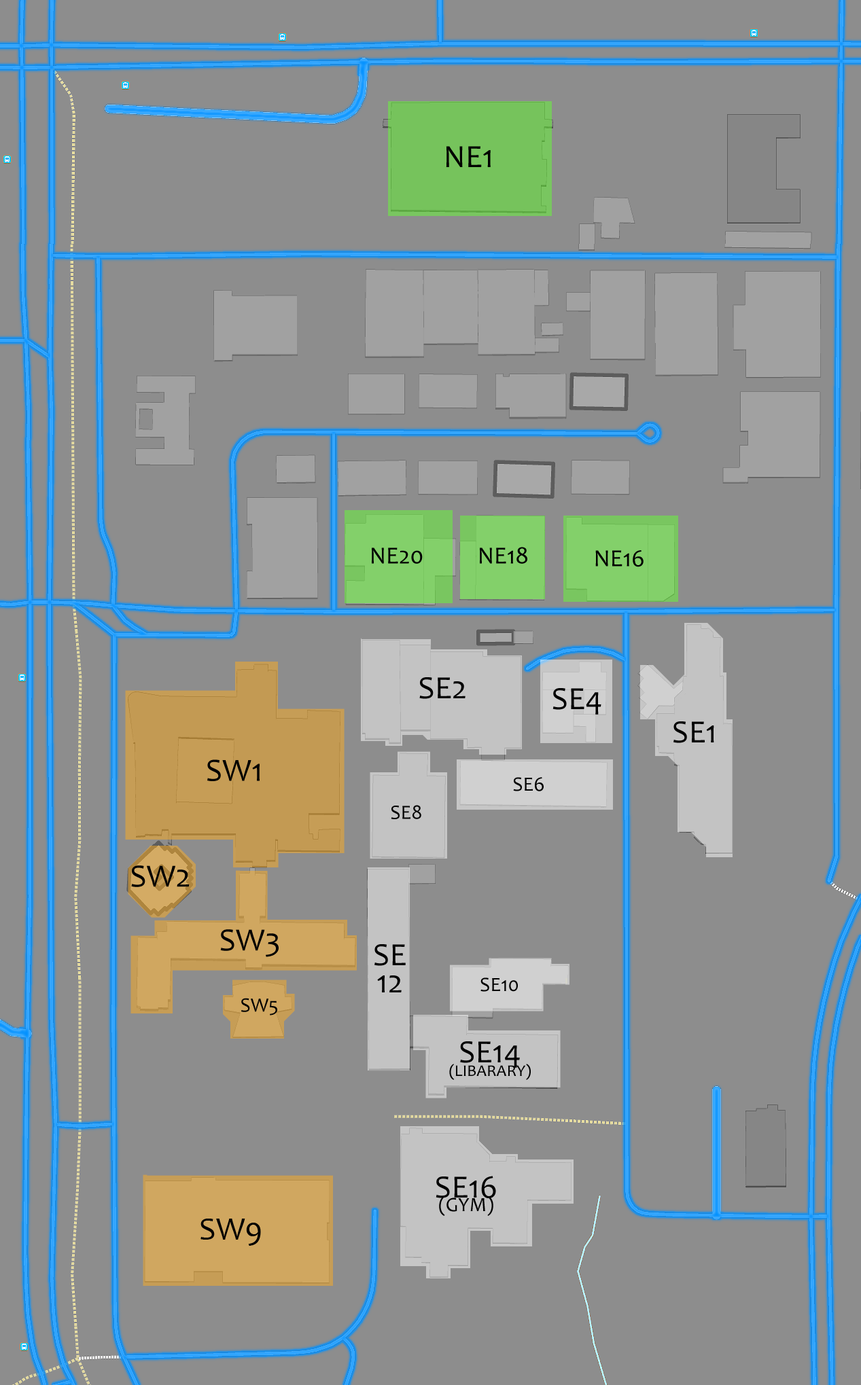
<style>
.page{position:relative;width:861px;height:1385px;background:#8d8d8d}
.page>*{position:absolute;margin:0}
.t1{font:32.6px "Candara";color:#000000}
.t2{font:24.5px "Candara";color:#000000}
.t3{font:20.4px "Candara";color:#000000}
.t4{font:32.6px/13.6px "Candara";color:#000000}
.t5{font:16.3px/13.6px "Candara";color:#000000}
.t6{font:20.4px/13.6px "Candara";color:#000000}
</style>
<div class="page">
<p class="t1" style="left:446px;top:146px;width:45px;height:21px">NE1</p>
<p class="t2" style="left:372px;top:548px;width:51px;height:16px">NE20</p>
<p class="t2" style="left:480px;top:547px;width:47px;height:17px">NE18</p>
<p class="t2" style="left:595px;top:550px;width:48px;height:17px">NE16</p>
<p class="t1" style="left:419px;top:677px;width:46px;height:22px">SE2</p>
<p class="t1" style="left:552px;top:688px;width:49px;height:27px">SE4</p>
<p class="t1" style="left:673px;top:722px;width:41px;height:21px">SE1</p>
<p class="t1" style="left:207px;top:760px;width:53px;height:21px">SW1</p>
<p class="t3" style="left:513px;top:777px;width:31px;height:14px">SE6</p>
<p class="t3" style="left:391px;top:805px;width:30px;height:14px">SE8</p>
<p class="t1" style="left:131px;top:866px;width:59px;height:21px">SW2</p>
<p class="t1" style="left:220px;top:929px;width:59px;height:28px">SW3</p>
<p class="t4" style="left:374px;top:944px;width:32px;height:49px;text-align:center">SE<br><br>12</p>
<p class="t3" style="left:480px;top:978px;width:38px;height:14px">SE10</p>
<p class="t3" style="left:241px;top:998px;width:36px;height:18px">SW5</p>
<p class="t5" style="left:449px;top:1042px;width:82px;height:38px;text-align:center"><span class="t4">SE14<br></span>(LIBARARY)</p>
<p class="t6" style="left:435px;top:1176px;width:61px;height:40px;text-align:center"><span class="t4">SE16<br></span>(GYM)</p>
<p class="t1" style="left:200px;top:1219px;width:61px;height:27px">SW9</p>
</div>
